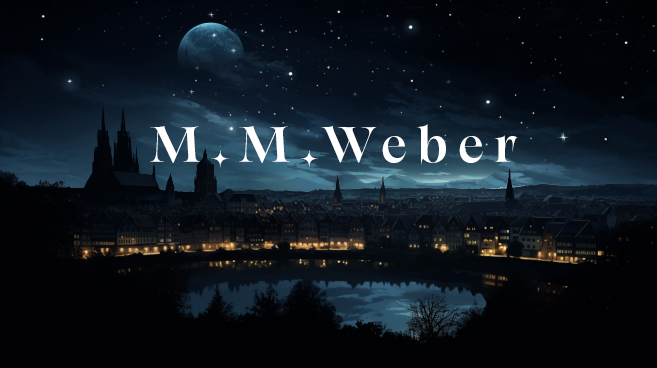
<style>
.page{position:relative;width:657px;height:368px}
.page>*{position:absolute;margin:0}
.t1{font:50px "Gwen-Bold";letter-spacing:0.2em;color:#ffffff}
</style>
<div class="page">
<p class="t1" style="left:150px;top:124px;width:368px;height:44px">M.M.Weber</p>
</div>
